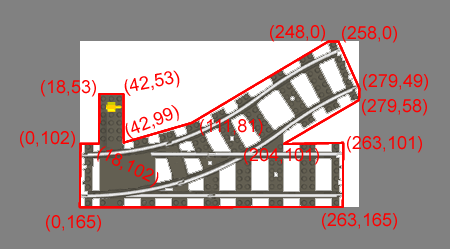
<style>
.page{position:relative;width:450px;height:249px;background:#818181}
.page>*{position:absolute;margin:0}
.t1{font:18px "ArialMT";color:#ff0000}
</style>
<div class="page">
<p class="t1" style="left:270px;top:25px;width:55px;height:17px">(248,0)</p>
<p class="t1" style="left:342px;top:26px;width:55px;height:17px">(258,0)</p>
<p class="t1" style="left:124px;top:70px;width:56px;height:26px;rotate:-11deg">(42,53)</p>
<p class="t1" style="left:363px;top:74px;width:65px;height:17px">(279,49)</p>
<p class="t1" style="left:41px;top:80px;width:55px;height:17px">(18,53)</p>
<p class="t1" style="left:362px;top:99px;width:65px;height:17px">(279,58)</p>
<p class="t1" style="left:125px;top:105px;width:54px;height:34px;rotate:-21deg">(42,99)</p>
<p class="t1" style="left:200px;top:119px;width:63px;height:17px">(111,81)</p>
<p class="t1" style="left:20px;top:131px;width:55px;height:17px">(0,102)</p>
<p class="t1" style="left:347px;top:136px;width:75px;height:17px">(263,101)</p>
<p class="t1" style="left:97px;top:146px;width:62px;height:42px;rotate:26deg">(18,102)</p>
<p class="t1" style="left:244px;top:148px;width:75px;height:17px">(204,101)</p>
<p class="t1" style="left:46px;top:215px;width:55px;height:17px">(0,165)</p>
<p class="t1" style="left:322px;top:213px;width:75px;height:17px">(263,165)</p>
</div>
